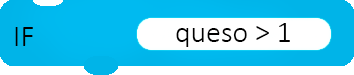
<style>
.page{position:relative;width:354px;height:75px;background:#ffffff}
.page>*{position:absolute;margin:0}
.t1{font:30px "Calibri-Light";color:#000000}
</style>
<div class="page">
<p class="t1" style="left:15px;top:27px;width:18px;height:19px">IF</p>
<p class="t1" style="left:176px;top:23px;width:114px;height:24px">queso &gt; 1</p>
</div>
